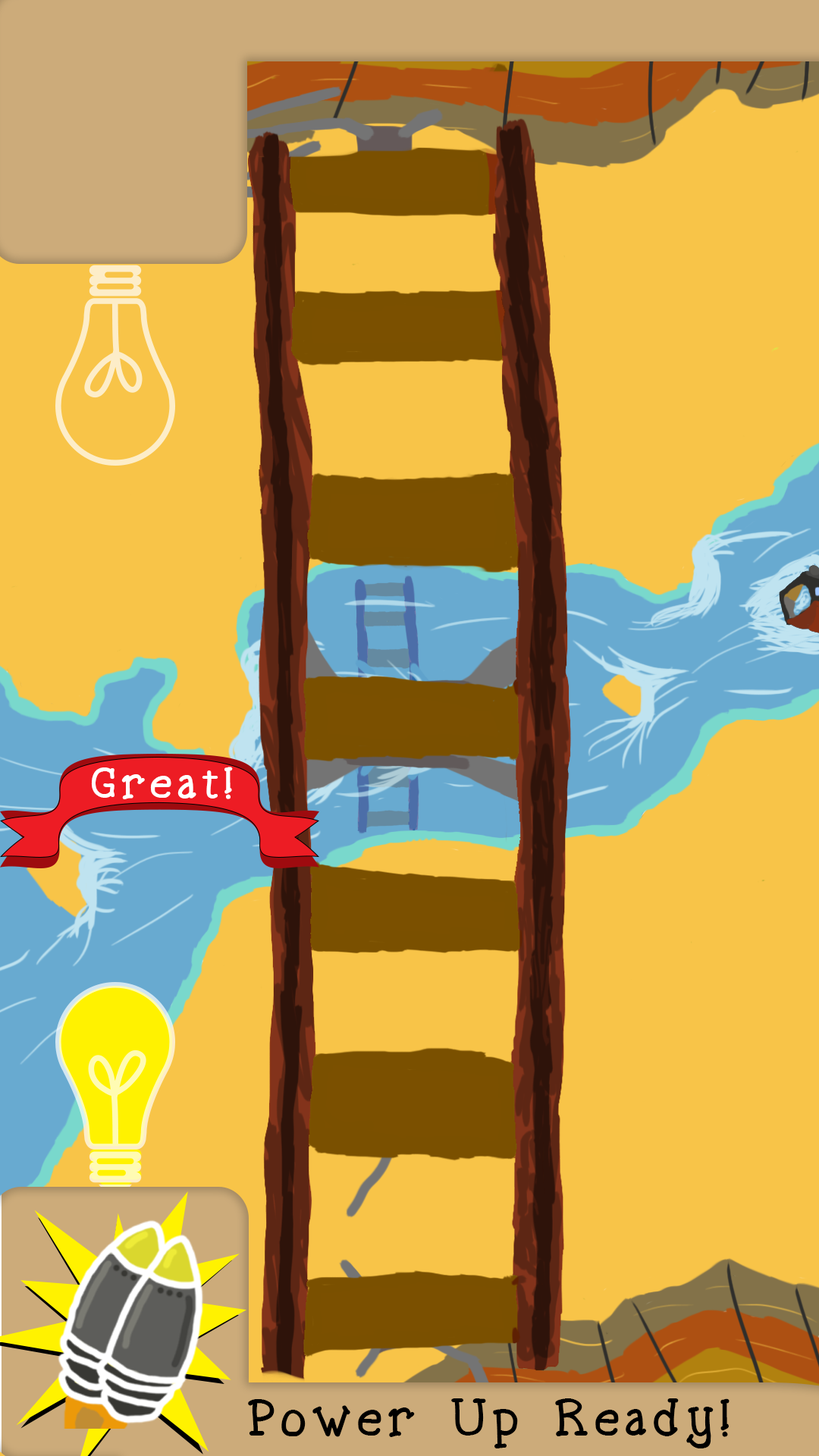
<style>
.page{position:relative;width:819px;height:1456px;background:#f8c448}
.page>*{position:absolute;margin:0}
.t1{font:46.1px "Spellstone";letter-spacing:0.08em;color:#ffffff;scale:1.04 1}
.t2{font:54.6px "Spellstone";letter-spacing:0.08em;color:#000000}
</style>
<div class="page">
<p class="t1" style="left:91px;top:767px;width:142px;height:32px">Great!</p>
<p class="t2" style="left:248px;top:1398px;width:482px;height:50px">Power Up Ready!</p>
</div>
